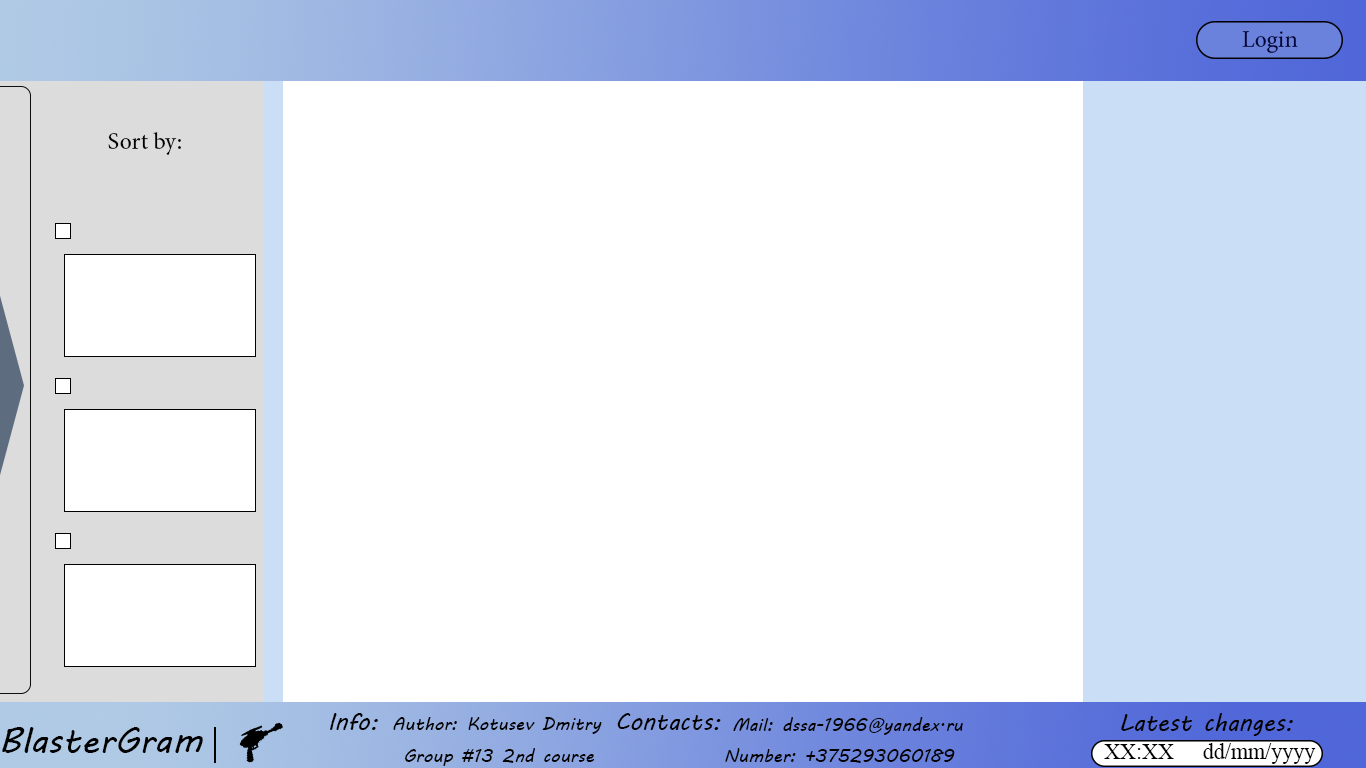
<style>
.page{position:relative;width:1366px;height:768px;background:#ffffff}
.page>*{position:absolute;margin:0}
.t1{font:24px "MinionPro-Regular";color:#02053c}
.t2{font:24px "MinionPro-Regular";color:#000000}
.t3{font:24px "MVBoli";color:#000000}
.t4{font:18px "MVBoli";color:#000000}
.t5{font:36px "MVBoli";color:#000000}
.t6{font:22px "TimesNewRomanPSMT";color:#000000}
</style>
<div class="page">
<p class="t1" style="left:1242px;top:31px;width:56px;height:22px">Login</p>
<p class="t2" style="left:108px;top:132px;width:73px;height:23px">Sort by:</p>
<p class="t3" style="left:330px;top:713px;width:48px;height:17px">Info:</p>
<p class="t3" style="left:617px;top:713px;width:104px;height:17px">Contacts:</p>
<p class="t3" style="left:1121px;top:713px;width:172px;height:23px">Latest changes:</p>
<p class="t4" style="left:393px;top:717px;width:209px;height:17px">Author: Kotusev Dmitry</p>
<p class="t4" style="left:733px;top:717px;width:230px;height:18px">Mail: dssa-1966@yandex.ru</p>
<p class="t5" style="left:2px;top:727px;width:201px;height:26px">BlasterGram</p>
<p class="t4" style="left:405px;top:749px;width:88px;height:17px">Group #13</p>
<p class="t4" style="left:502px;top:748px;width:92px;height:15px">2nd course</p>
<p class="t4" style="left:725px;top:748px;width:230px;height:15px">Number: +375293060189</p>
<p class="t6" style="left:1104px;top:744px;width:70px;height:15px">XX:XX</p>
<p class="t6" style="left:1203px;top:743px;width:113px;height:21px">dd/mm/yyyy</p>
</div>
